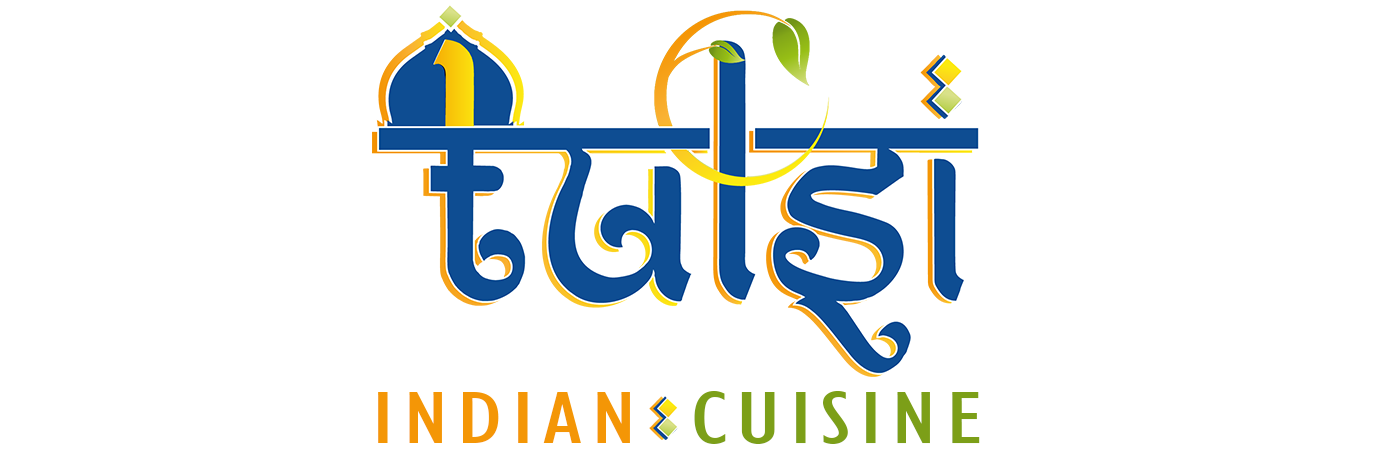
<style>
.page{position:relative;width:1375px;height:450px;background:#ffffff}
.page>*{position:absolute;margin:0}
.t1{font:76.9px "GillSansMT-Condensed";letter-spacing:0.085em;color:#7c9f18;scale:1.41 1}
.t2{font:76.9px "GillSansMT-Condensed";letter-spacing:0.085em;color:#f49606;scale:1.41 1}
</style>
<div class="page">
<p class="t1" style="left:378px;top:391px;width:602px;height:53px"><span class="t2">INDIAN </span>CUISINE</p>
</div>
